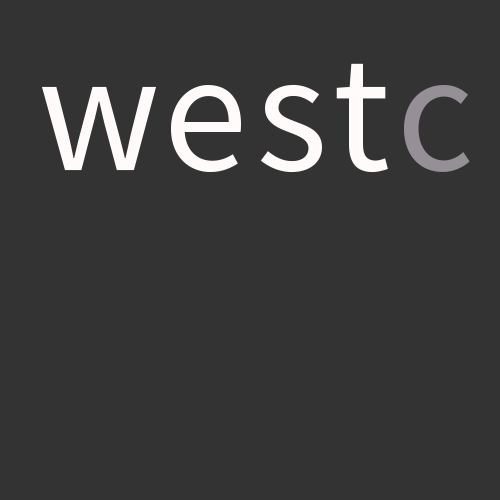
<style>
.page{position:relative;width:500px;height:500px;background:#333333}
.page>*{position:absolute;margin:0}
.t1{font:170px "SourceSansPro-Regular";letter-spacing:0.05em;color:#fffbfb}
.t2{font:170px "SourceSansPro-Regular";letter-spacing:0.025em;color:#fffbfb}
.t3{font:170px "SourceSansPro-Regular";letter-spacing:0.05em;color:#949095}
</style>
<div class="page">
<p class="t1" style="left:42px;top:63px;width:428px;height:110px"><span class="t2">w</span>est<span class="t3">c</span></p>
</div>
